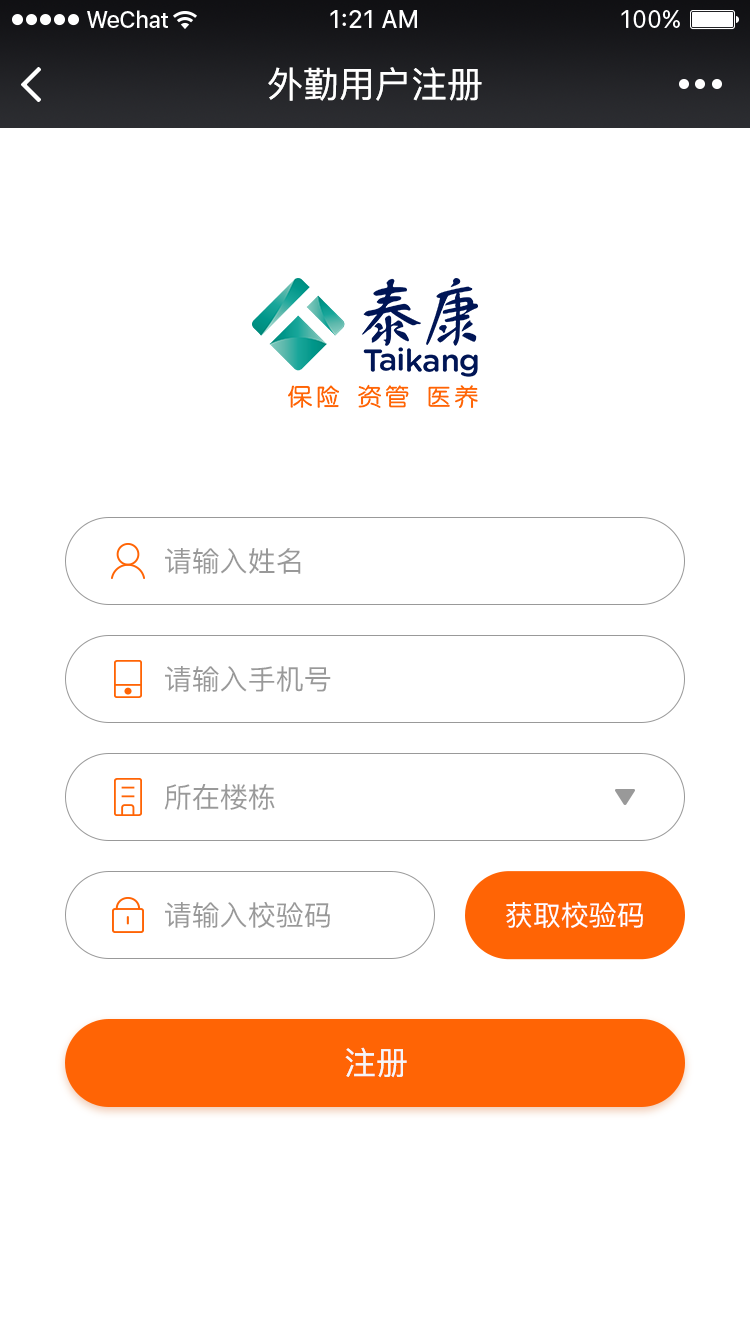
<style>
.page{position:relative;width:750px;height:1334px;background:#ffffff}
.page>*{position:absolute;margin:0}
.t1{font:36px "PingFang-SC-Medium";color:#ffffff}
.t2{font:28px "PingFang-SC-Medium";color:#999999;text-transform:uppercase}
.t3{font:28px "PingFang-SC-Medium";color:#ffffff;text-transform:uppercase}
.t4{font:32px "PingFang-SC-Medium";color:#f5f6f8;text-transform:uppercase}
</style>
<div class="page">
<p class="t1" style="left:268px;top:67px;width:214px;height:34px">外勤用户注册</p>
<p class="t2" style="left:165px;top:548px;width:136px;height:26px">请输入姓名</p>
<p class="t2" style="left:165px;top:666px;width:166px;height:26px">请输入手机号</p>
<p class="t2" style="left:164px;top:784px;width:111px;height:26px">所在楼栋</p>
<p class="t2" style="left:165px;top:901px;width:165px;height:27px">请输入校验码</p>
<p class="t3" style="left:506px;top:901px;width:137px;height:27px">获取校验码</p>
<p class="t4" style="left:345px;top:1047px;width:62px;height:31px">注册</p>
</div>
